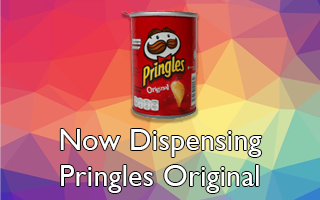
<style>
.page{position:relative;width:320px;height:200px}
.page>*{position:absolute;margin:0}
.t1{font:30.4px "GillSansMT";color:#ffffff}
</style>
<div class="page">
<p class="t1" style="left:60px;top:129px;width:202px;height:64px;text-align:center">Now Dispensing<br>Pringles Original</p>
</div>
